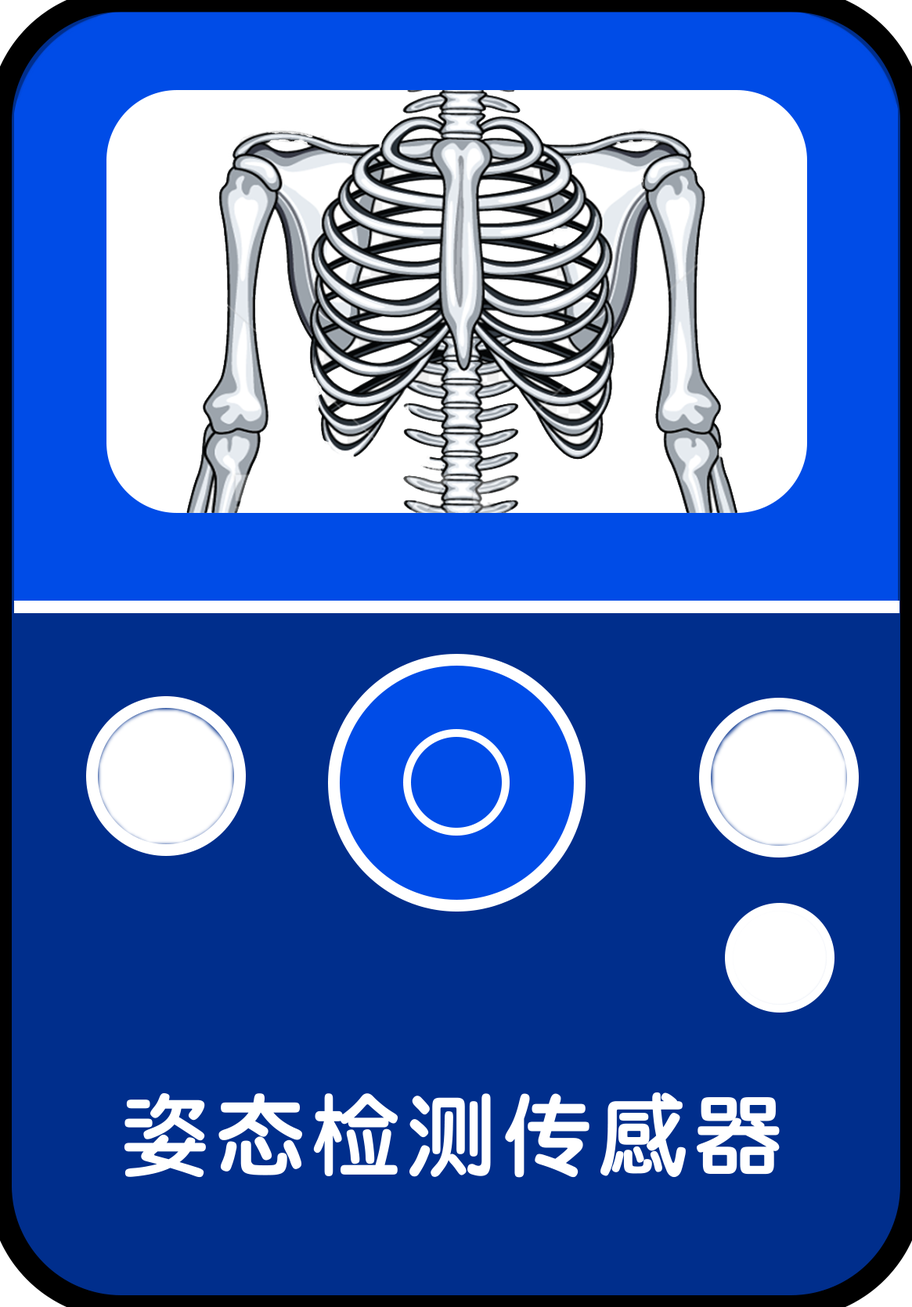
<style>
.page{position:relative;width:912px;height:1307px;background:#002e8c}
.page>*{position:absolute;margin:0}
.t1{font:87px "STYuanti-TC-Bold";letter-spacing:0.1em;color:#ffffff}
</style>
<div class="page">
<p class="t1" style="left:124px;top:1092px;width:656px;height:86px">姿态检测传感器</p>
</div>
